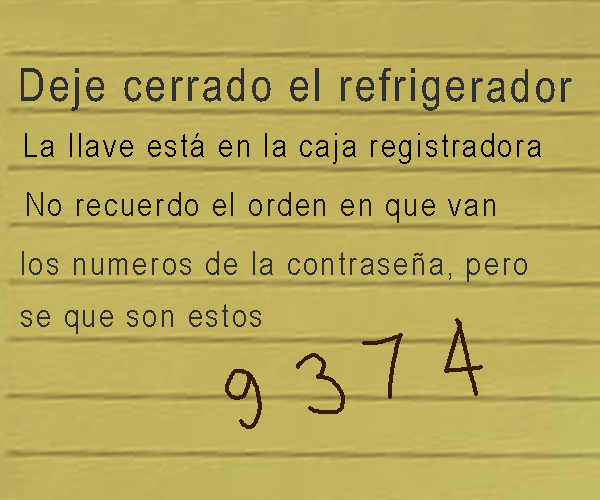
<style>
.page{position:relative;width:600px;height:500px}
.page>*{position:absolute;margin:0}
.t1{font:45.9px "ArialNarrow";letter-spacing:0.075em;color:#313030}
.t2{font:33.2px "ArialNarrow";letter-spacing:0.075em;color:#000000}
.t3{font:33.2px "ArialNarrow";letter-spacing:0.075em;color:#171717}
.t4{font:33.2px/52.5px "ArialNarrow";letter-spacing:0.075em;color:#303030}
</style>
<div class="page">
<p class="t1" style="left:21px;top:68px;width:551px;height:43px">Deje cerrado el refrigerador</p>
<p class="t2" style="left:25px;top:133px;width:516px;height:31px">La llave está en la caja registradora</p>
<p class="t3" style="left:27px;top:192px;width:468px;height:31px">No recuerdo el orden en que van</p>
<p class="t4" style="left:21px;top:251px;width:506px;height:83px">los numeros de la contraseña, pero<br>se que son estos</p>
</div>
